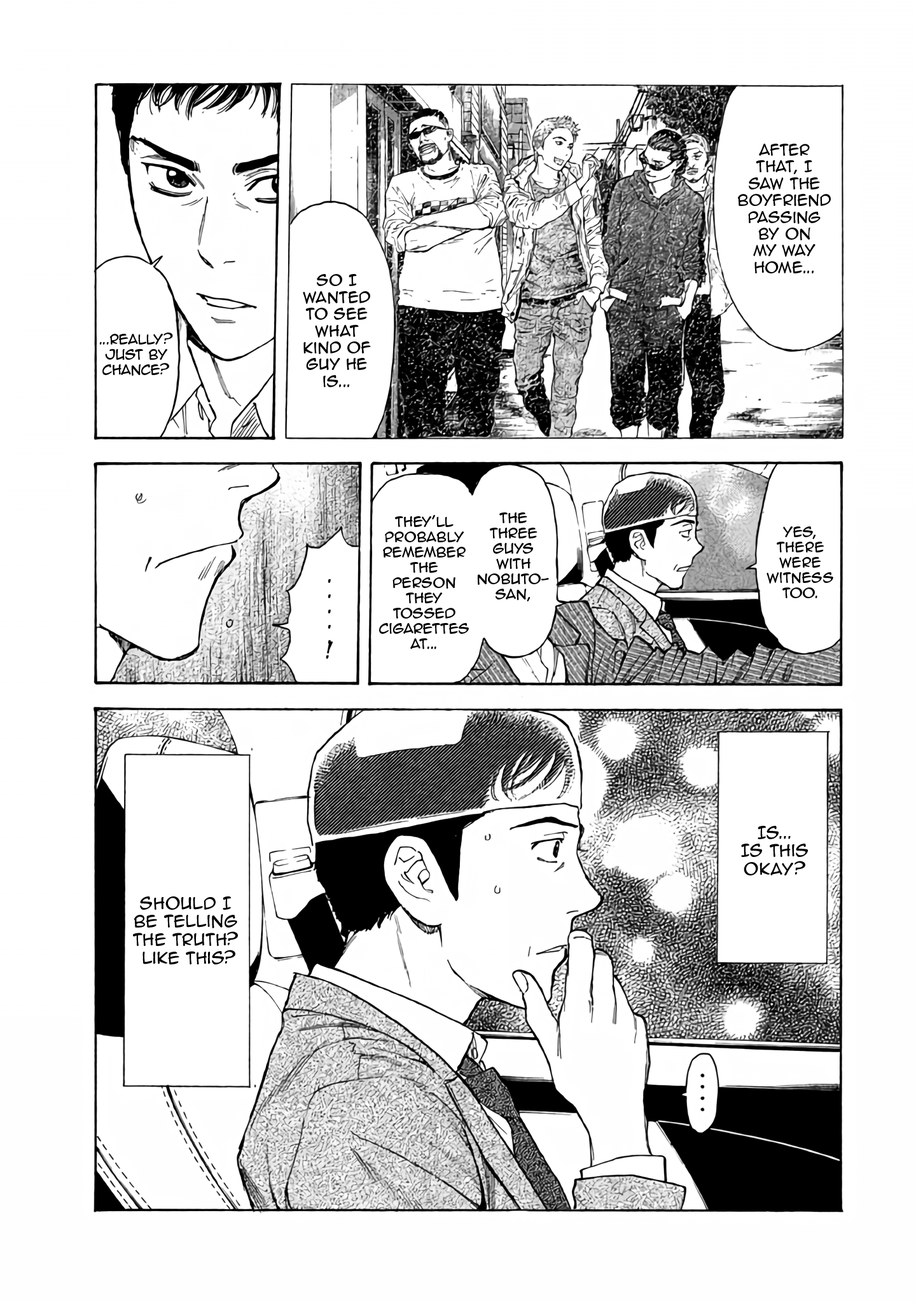
<style>
.page{position:relative;width:916px;height:1302px;background:#ffffff}
.page>*{position:absolute;margin:0}
.t1{font:14px "AnimeAce2.0BB";color:#000000}
.t2{font:12.7px "AnimeAce2.0BB";color:#000000}
.t3{font:19.1px/15.3px "AnimeAce2.0BB";color:#000000}
.t4{font:15.3px "AnimeAce2.0BB";color:#000000}
</style>
<div class="page">
<p class="t1" style="left:738px;top:144px;width:92px;height:129px;text-align:center">AFter that, I saw the boyfriend passing by on my way home...</p>
<p class="t1" style="left:303px;top:274px;width:68px;height:113px;text-align:center">So I wanted to see what kind of guy he is...</p>
<p class="t2" style="left:99px;top:333px;width:74px;height:43px;text-align:center">...Really? Just by chance?</p>
<p class="t2" style="left:379px;top:515px;width:90px;height:134px;text-align:center">THey’ll probably remember the person they tossed cigarettes at...</p>
<p class="t2" style="left:477px;top:513px;width:72px;height:89px;text-align:center">The three guys with Nobuto-san,</p>
<p class="t2" style="left:766px;top:527px;width:67px;height:71px;text-align:center">Yes, <br>there were witness too.</p>
<p class="t3" style="left:326px;top:579px;width:7px;height:80px;text-align:center">.<br>.<br>.<br>.<br>.<br>!</p>
<p class="t4" style="left:741px;top:826px;width:67px;height:50px;text-align:center">Is... <br>Is this okay?</p>
<p class="t4" style="left:133px;top:897px;width:105px;height:68px;text-align:center">Should I be telling the truth?<br> like this?</p>
</div>
